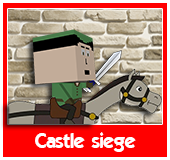
<style>
.page{position:relative;width:170px;height:160px;background:#ff0000}
.page>*{position:absolute;margin:0}
.t1{font:20px "ELEGANCE";color:#ffffff}
</style>
<div class="page">
<p class="t1" style="left:35px;top:132px;width:101px;height:20px">Castle siege</p>
</div>
